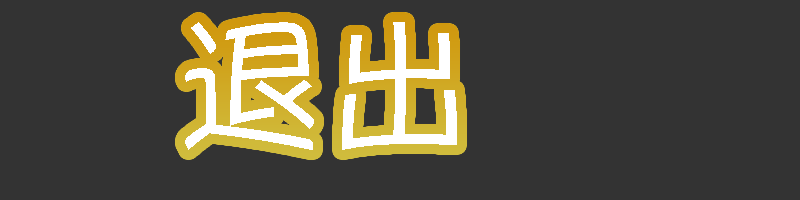
<style>
.page{position:relative;width:800px;height:200px;background:#333333}
.page>*{position:absolute;margin:0}
.t1{font:150px "YuppySC-Regular";color:#ffffff}
</style>
<div class="page">
<p class="t1" style="left:185px;top:22px;width:272px;height:128px">退出</p>
</div>
